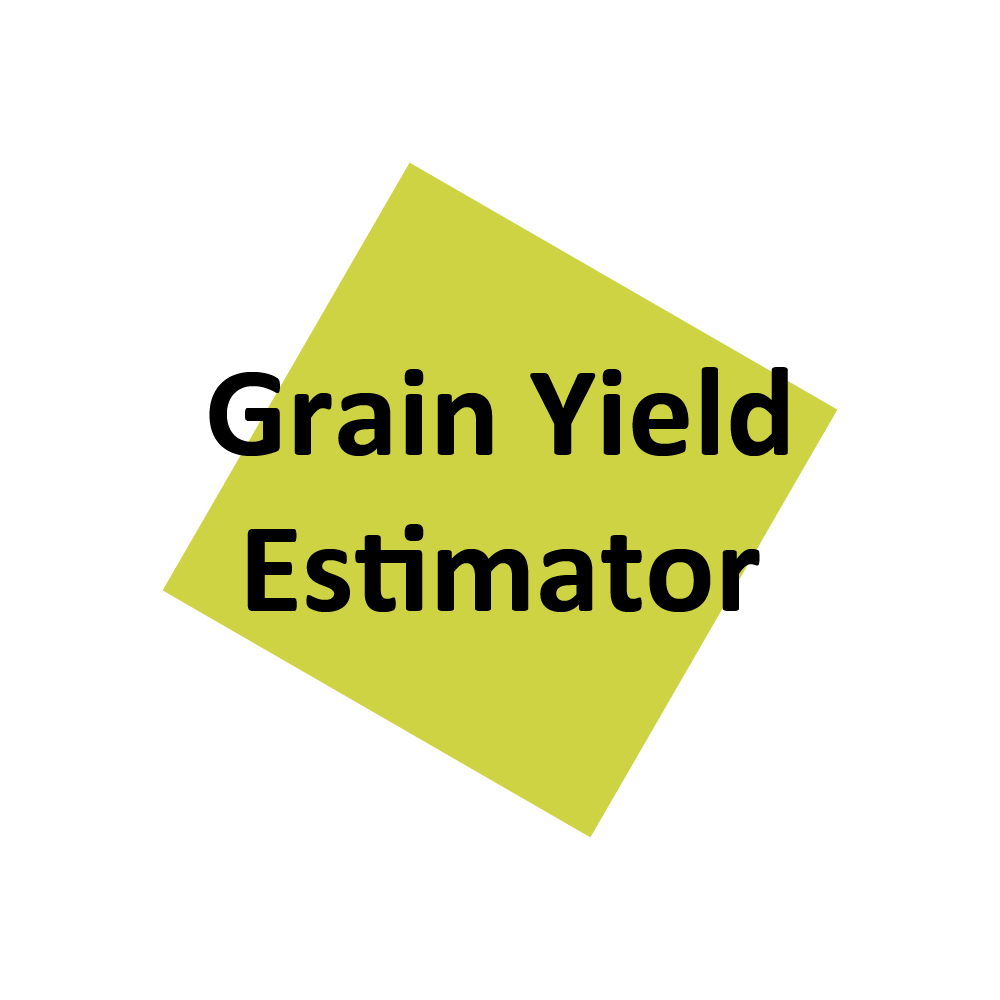
<style>
.page{position:relative;width:1000px;height:1000px;background:#ffffff}
.page>*{position:absolute;margin:0}
.t1{font:130px "Calibri-Bold";color:#000000}
</style>
<div class="page">
<p class="t1" style="left:209px;top:367px;width:579px;height:245px;text-align:center">Grain Yield<br>Estimator</p>
</div>
